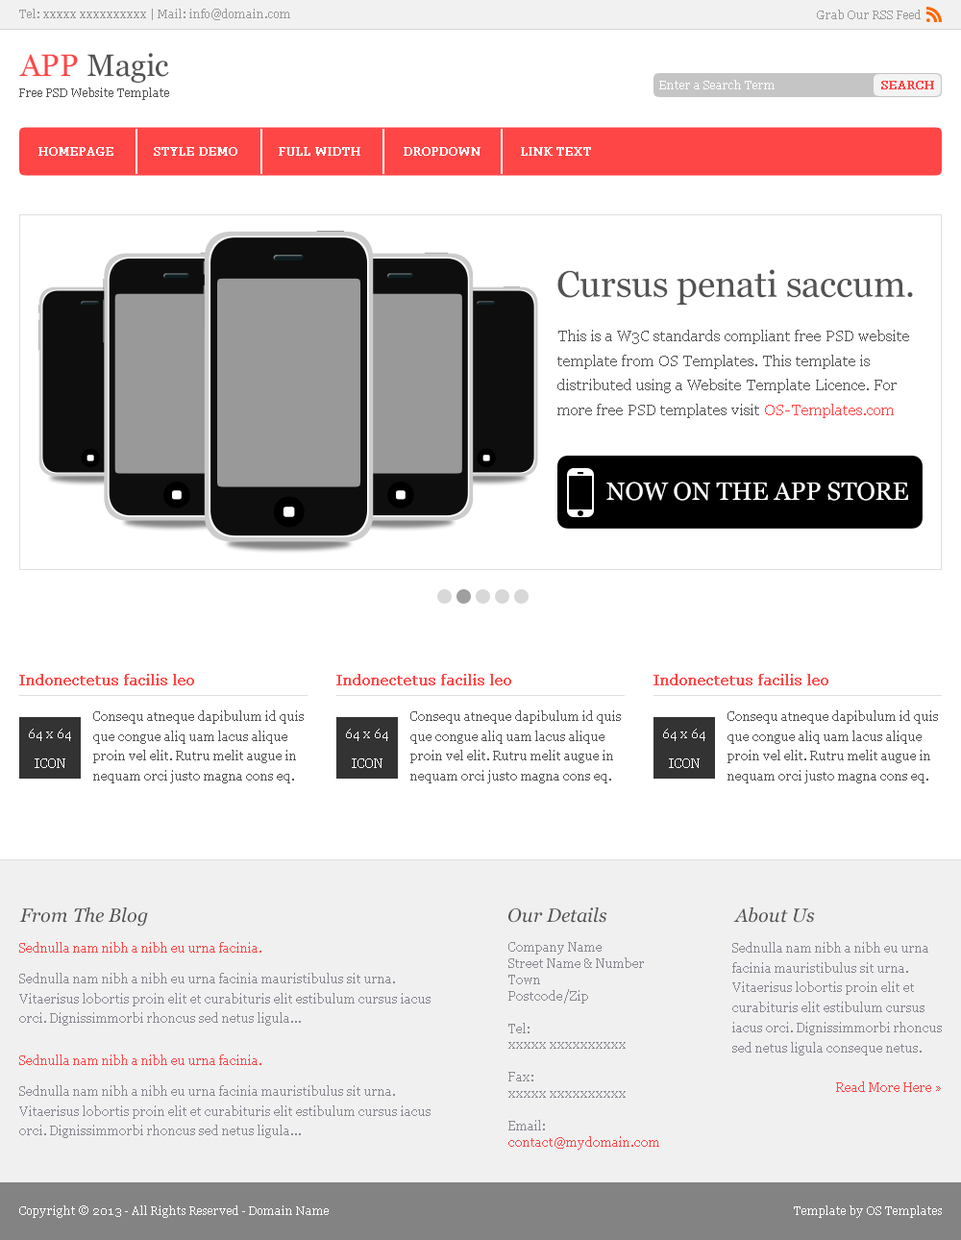
<style>
.page{position:relative;width:961px;height:1240px;background:#ffffff}
.page>*{position:absolute;margin:0}
.t1{font:11.5px "Georgia";color:#999999}
.t2{font:30.8px "Georgia";color:#525252}
.t3{font:30.8px "Georgia";color:#ff4646}
.t4{font:11.5px "Georgia";color:#535353}
.t5{font:11.5px "Georgia";color:#ffffff}
.t6{font:11.5px "Georgia";color:#ff4646;font-weight:bold}
.t7{font:11.5px "Georgia";color:#ffffff;font-weight:bold}
.t8{font:36.5px "Georgia";color:#535353}
.t9{font:15.4px/24.6px "Georgia";color:#545454}
.t10{font:15.4px/24.6px "Georgia";color:#ff4646}
.t11{font:25px "Georgia";color:#ffffff}
.t12{font:15.4px "Georgia";color:#ff4646;font-weight:bold}
.t13{font:12.5px/20px "Georgia";color:#535353}
.t14{font:12.5px/15px "Georgia";color:#ffffff}
.t15{font:19.2px "Georgia-Italic";color:#545454}
.t16{font:12.5px "Georgia";color:#ff4646}
.t17{font:12.5px/16.2px "Georgia";color:#8a8791}
.t18{font:12.5px/16.2px "Georgia";color:#ff4646}
.t19{font:12.5px/20px "Georgia";color:#8a8691}
.t20{font:12.5px/20px "Georgia";color:#ff4646}
.t21{font:12.5px/20px "Georgia";color:#8a8791}
</style>
<div class="page">
<p class="t1" style="left:19px;top:9px;width:271px;height:11px">Tel: xxxxx xxxxxxxxxx | Mail: info@domain.com</p>
<p class="t1" style="left:817px;top:10px;width:104px;height:9px">Grab Our RSS Feed</p>
<p class="t2" style="left:19px;top:53px;width:150px;height:30px"><span class="t3">APP</span> Magic</p>
<p class="t4" style="left:19px;top:87px;width:150px;height:13px">Free PSD Website Template</p>
<p class="t5" style="left:660px;top:80px;width:115px;height:9px">Enter a Search Term</p>
<p class="t6" style="left:882px;top:81px;width:53px;height:8px">SEARCH</p>
<p class="t7" style="left:38px;top:147px;width:75px;height:9px">HOMEPAGE</p>
<p class="t7" style="left:154px;top:147px;width:83px;height:9px">STYLE DEMO</p>
<p class="t7" style="left:279px;top:147px;width:82px;height:9px">FULL WIDTH</p>
<p class="t7" style="left:404px;top:147px;width:77px;height:9px">DROPDOWN</p>
<p class="t7" style="left:521px;top:147px;width:70px;height:9px">LINK TEXT</p>
<p class="t8" style="left:558px;top:269px;width:355px;height:36px">Cursus penati saccum.</p>
<p class="t9" style="left:558px;top:330px;width:352px;height:88px">This is a W3C standards compliant free PSD website template from OS Templates. This template is distributed using a Website Template Licence. For more free PSD templates visit <span class="t10">OS-Templates.com</span></p>
<p class="t11" style="left:607px;top:482px;width:302px;height:19px">NOW ON THE APP STORE</p>
<p class="t12" style="left:19px;top:674px;width:175px;height:12px">Indonectetus facilis leo</p>
<p class="t12" style="left:337px;top:674px;width:174px;height:12px">Indonectetus facilis leo</p>
<p class="t12" style="left:654px;top:674px;width:175px;height:12px">Indonectetus facilis leo</p>
<p class="t13" style="left:93px;top:711px;width:211px;height:73px">Consequ atneque dapibulum id quis que congue aliq uam lacus alique proin vel elit. Rutru melit augue in nequam orci justo magna cons eq.</p>
<p class="t13" style="left:411px;top:711px;width:210px;height:73px">Consequ atneque dapibulum id quis que congue aliq uam lacus alique proin vel elit. Rutru melit augue in nequam orci justo magna cons eq.</p>
<p class="t13" style="left:728px;top:711px;width:210px;height:73px">Consequ atneque dapibulum id quis que congue aliq uam lacus alique proin vel elit. Rutru melit augue in nequam orci justo magna cons eq.</p>
<p class="t14" style="left:29px;top:729px;width:42px;height:39px;text-align:center">64 x 64<br><br>ICON</p>
<p class="t14" style="left:346px;top:729px;width:42px;height:39px;text-align:center">64 x 64<br><br>ICON</p>
<p class="t14" style="left:663px;top:729px;width:43px;height:39px;text-align:center">64 x 64<br><br>ICON</p>
<p class="t15" style="left:19px;top:908px;width:129px;height:19px">From The Blog</p>
<p class="t15" style="left:509px;top:908px;width:99px;height:15px">Our Details</p>
<p class="t15" style="left:734px;top:908px;width:81px;height:15px">About Us</p>
<p class="t16" style="left:19px;top:942px;width:243px;height:11px">Sednulla nam nibh a nibh eu urna facinia.</p>
<p class="t17" style="left:509px;top:942px;width:151px;height:208px">Company Name<br>Street Name &amp; Number<br>Town<br>Postcode/Zip<br><br>Tel:<br>xxxxx xxxxxxxxxx<br><br>Fax:<br>xxxxx xxxxxxxxxx<br><br>Email:<br><span class="t18">contact@mydomain.com</span></p>
<p class="t19" style="left:733px;top:942px;width:209px;height:150px">Sednulla nam nibh a nibh eu urna facinia mauristibulus sit urna. Vitaerisus lobortis proin elit et curabituris elit estibulum cursus iacus orci. Dignissimmorbi rhoncus sed netus ligula conseque netus.<br><br><span class="t20">Read More Here »</span></p>
<p class="t21" style="left:19px;top:973px;width:412px;height:53px">Sednulla nam nibh a nibh eu urna facinia mauristibulus sit urna. Vitaerisus lobortis proin elit et curabituris elit estibulum cursus iacus orci. Dignissimmorbi rhoncus sed netus ligula...</p>
<p class="t16" style="left:19px;top:1055px;width:243px;height:10px">Sednulla nam nibh a nibh eu urna facinia.</p>
<p class="t21" style="left:19px;top:1085px;width:412px;height:53px">Sednulla nam nibh a nibh eu urna facinia mauristibulus sit urna. Vitaerisus lobortis proin elit et curabituris elit estibulum cursus iacus orci. Dignissimmorbi rhoncus sed netus ligula...</p>
<p class="t5" style="left:19px;top:1206px;width:310px;height:12px">Copyright © 2013 - All Rights Reserved - Domain Name</p>
<p class="t5" style="left:794px;top:1206px;width:148px;height:12px">Template by OS Templates</p>
</div>
